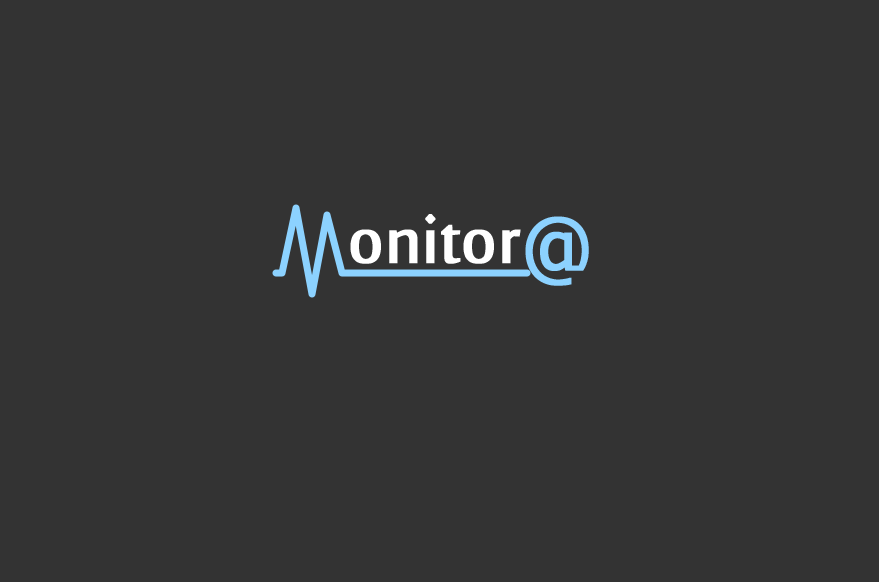
<style>
.page{position:relative;width:879px;height:582px;background:#333333}
.page>*{position:absolute;margin:0}
.t1{font:95px "SakkalMajalla";letter-spacing:-0.01em;color:#ffffff;font-weight:bold;scale:0.92 1}
.t2{font:80px "Verdana";letter-spacing:-0.05em;color:#8cd2ff;font-weight:bold;scale:0.92 1}
</style>
<div class="page">
<p class="t1" style="left:350px;top:214px;width:171px;height:50px">onitor</p>
<p class="t2" style="left:525px;top:216px;width:64px;height:70px">@</p>
</div>
